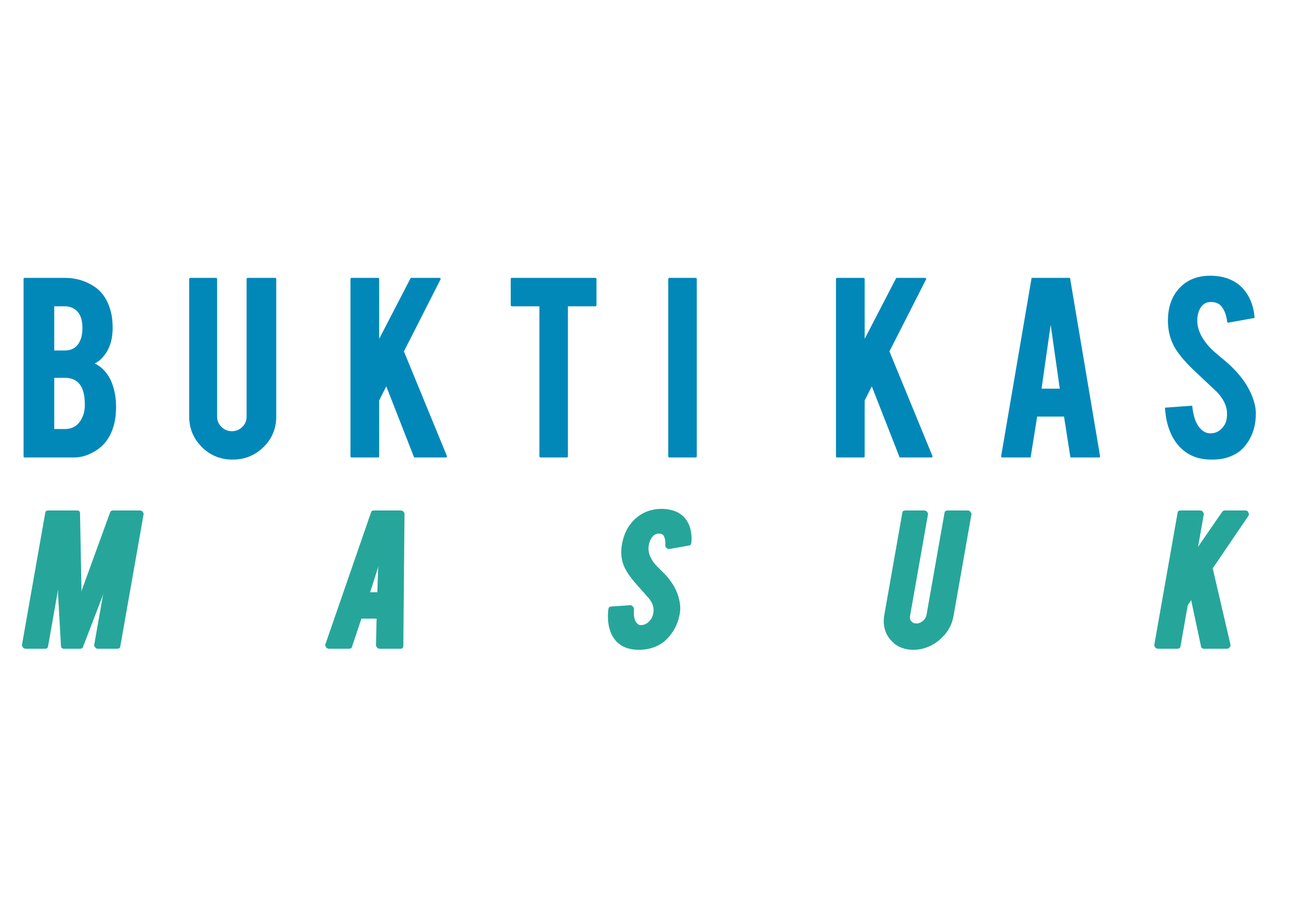
<style>
.page{position:relative;width:1313px;height:908px;background:#ffffff}
.page>*{position:absolute;margin:0}
.t1{font:200.3px "Bebas";letter-spacing:0.23em;color:#0188b9;font-weight:bold}
.t2{font:148px "Bebas";letter-spacing:1.285em;color:#26a69a;font-weight:bold;font-style:italic}
</style>
<div class="page">
<p class="t1" style="left:23px;top:275px;width:1233px;height:185px">BUKTI KAS</p>
<p class="t2" style="left:24px;top:511px;width:1223px;height:137px">masuk</p>
</div>
